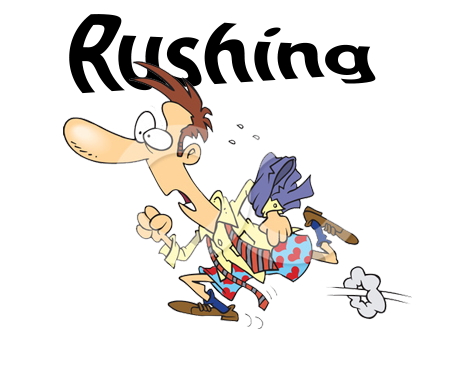
<style>
.page{position:relative;width:450px;height:365px;background:#ffffff}
.page>*{position:absolute;margin:0}
.t1{font:71.9px "MyriadPro-Bold";color:#000000;scale:1.08 1}
</style>
<div class="page">
<p class="t1" style="left:69px;top:14px;width:307px;height:80px">Rushing</p>
</div>
